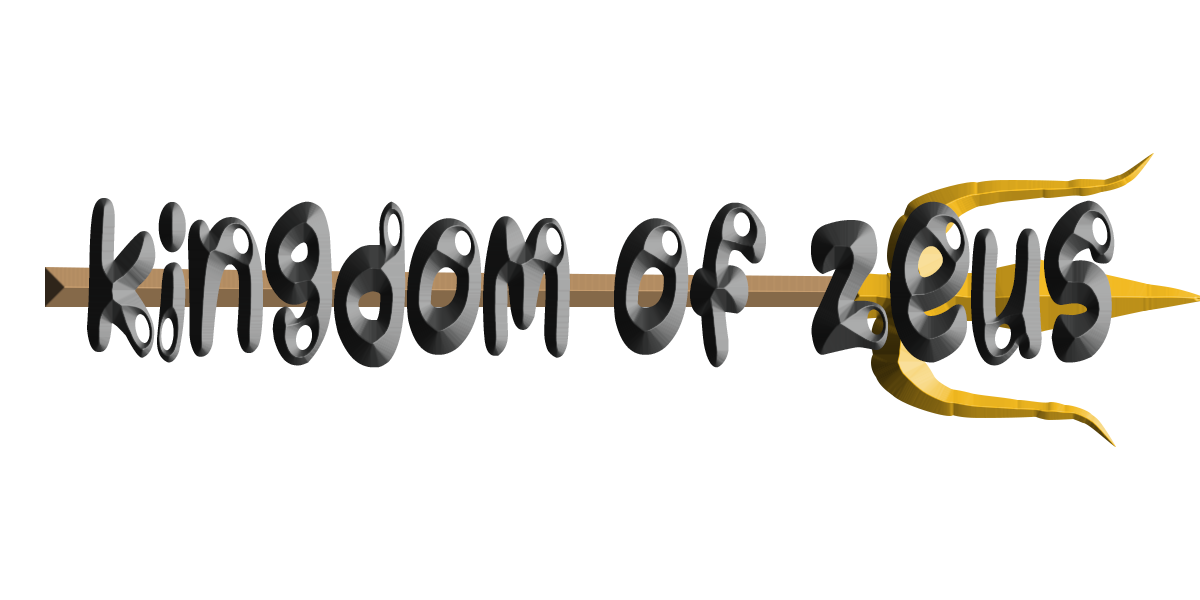
<style>
.page{position:relative;width:1200px;height:600px;background:#ffffff}
.page>*{position:absolute;margin:0}
.t1{font:168.7px "JuicyFruity";scale:0.51 1}
</style>
<div class="page">
<p class="t1" style="left:87px;top:198px;width:1028px;height:170px">Kingdom of zeus</p>
</div>
